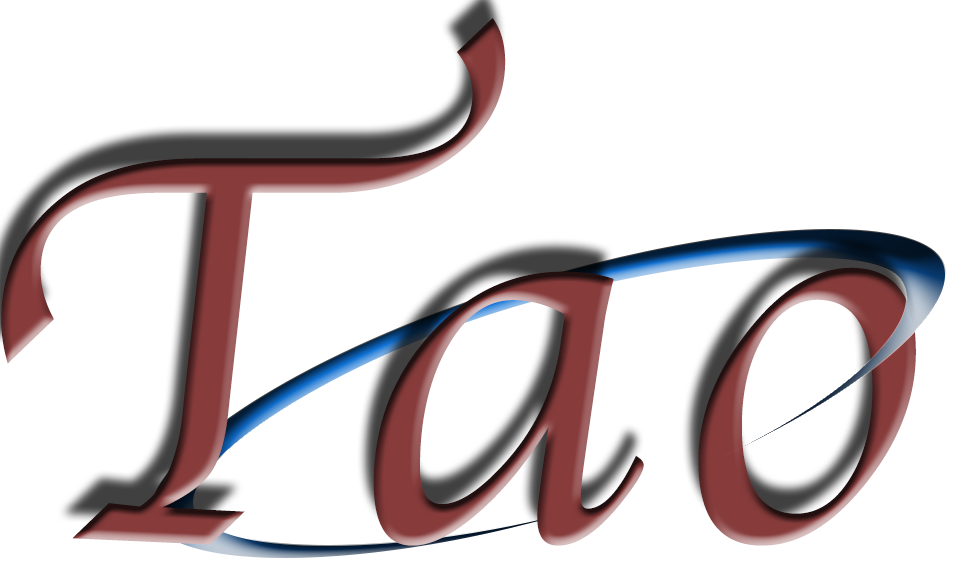
<style>
.page{position:relative;width:958px;height:564px;background:#ffffff}
.page>*{position:absolute;margin:0}
.t1{font:578.2px "Apple-Chancery";letter-spacing:-0.05em}
.t2{font:578.2px "Apple-Chancery";letter-spacing:0.05em}
.t3{font:578.2px "Apple-Chancery"}
</style>
<div class="page">
<p class="t1" style="left:1px;top:18px;width:915px;height:528px">T<span class="t2">a</span><span class="t3">o</span></p>
</div>
